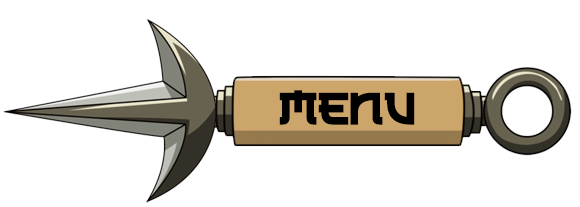
<style>
.page{position:relative;width:580px;height:207px;background:#ffffff}
.page>*{position:absolute;margin:0}
.t1{font:50px "Japanese3017";color:#000000}
</style>
<div class="page">
<p class="t1" style="left:279px;top:90px;width:136px;height:35px">menu</p>
</div>
